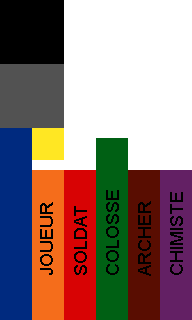
<style>
.page{position:relative;width:192px;height:320px;background:#ffffff}
.page>*{position:absolute;margin:0}
.t1{font:18px "ArialMT";color:#000000}
</style>
<div class="page">
<p class="t1" style="left:106px;top:190px;width:13px;height:85px;rotate:-90deg">COLOSSE</p>
<p class="t1" style="left:170px;top:192px;width:13px;height:83px;rotate:-90deg">CHIMISTE</p>
<p class="t1" style="left:40px;top:202px;width:13px;height:73px;rotate:-90deg">JOUEUR</p>
<p class="t1" style="left:74px;top:206px;width:13px;height:69px;rotate:-90deg">SOLDAT</p>
<p class="t1" style="left:138px;top:201px;width:13px;height:75px;rotate:-90deg">ARCHER</p>
</div>
